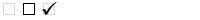
<style>
.page{position:relative;width:200px;height:20px;background:#ffffff}
.page>*{position:absolute;margin:0}
.t1{font:21px "OpenSymbol";letter-spacing:0.01em;color:#000000}
</style>
<div class="page">
<p class="t1" style="left:42px;top:2px;width:15px;height:14px">✓</p>
</div>
